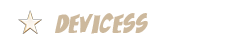
<style>
.page{position:relative;width:250px;height:45px;background:#ffffff}
.page>*{position:absolute;margin:0}
.t1{font:30px "HoustonComicsPersonalUse";color:#cdb99d}
</style>
<div class="page">
<p class="t1" style="left:55px;top:13px;width:93px;height:21px">DEVICESS</p>
</div>
